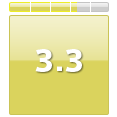
<style>
.page{position:relative;width:117px;height:117px;background:#dad35d}
.page>*{position:absolute;margin:0}
.t1{font:36px "Colaborate-Bold";color:#ffffff;text-transform:uppercase}
</style>
<div class="page">
<p class="t1" style="left:35px;top:49px;width:47px;height:23px">3.3</p>
</div>
